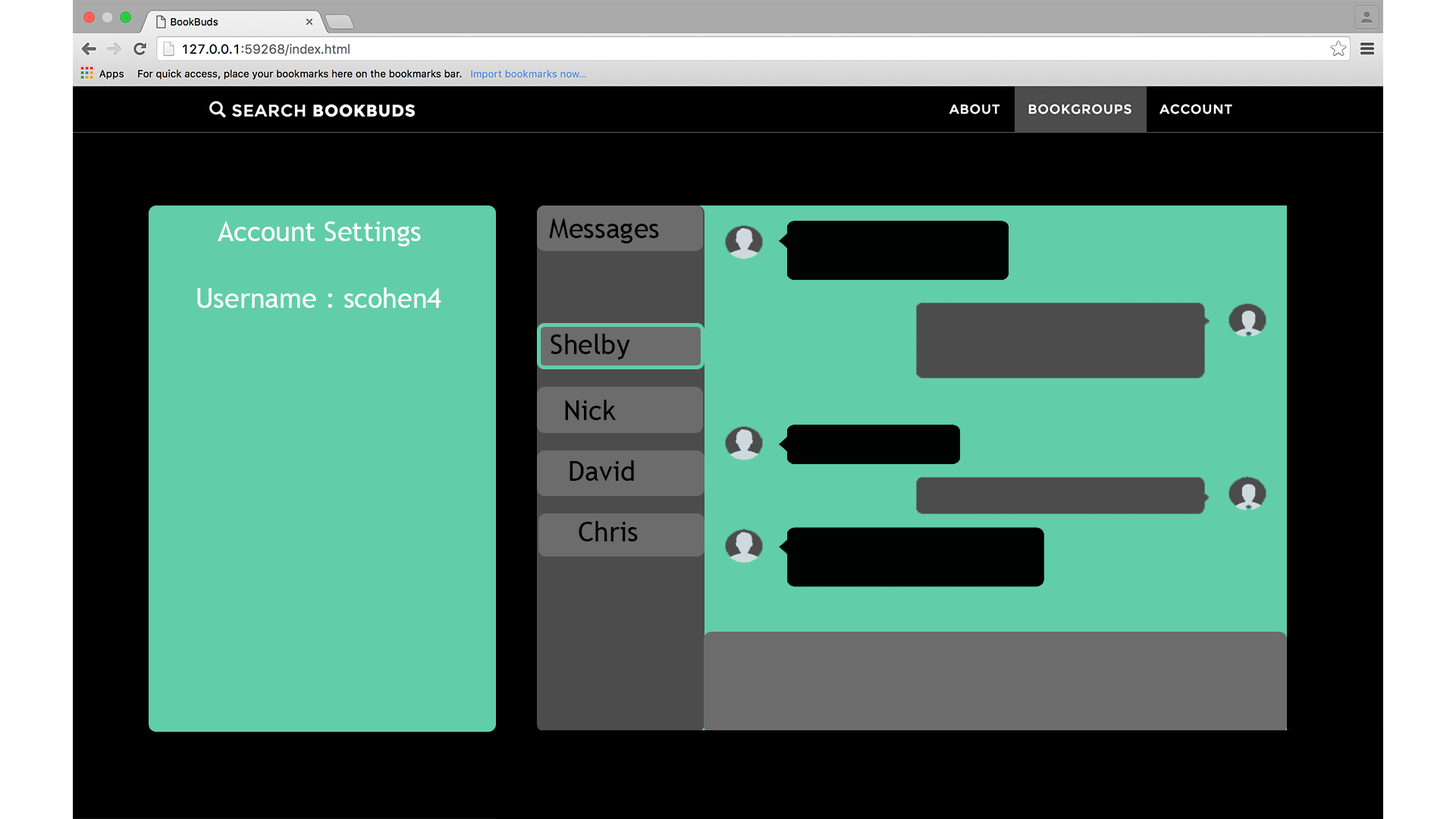
<style>
.page{position:relative;width:1456px;height:819px;background:#000000}
.page>*{position:absolute;margin:0}
.t1{font:27.3px "TrebuchetMS";color:#ffffff}
.t2{font:27.3px "TrebuchetMS";color:#000000}
</style>
<div class="page">
<p class="t1" style="left:218px;top:221px;width:203px;height:25px">Account Settings</p>
<p class="t2" style="left:549px;top:218px;width:110px;height:25px">Messages</p>
<p class="t1" style="left:197px;top:287px;width:244px;height:21px">Username : scohen4</p>
<p class="t2" style="left:551px;top:334px;width:79px;height:25px">Shelby</p>
<p class="t2" style="left:565px;top:400px;width:51px;height:20px">Nick</p>
<p class="t2" style="left:570px;top:460px;width:64px;height:21px">David</p>
<p class="t2" style="left:579px;top:521px;width:59px;height:20px">Chris</p>
</div>
